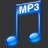
<style>
.page{position:relative;width:48px;height:48px;background:#333333}
.page>*{position:absolute;margin:0}
.t1{font:10px "Helvetica-Bold";color:#ffffff}
</style>
<div class="page">
<p class="t1" style="left:19px;top:3px;width:20px;height:11px;rotate:-12deg">MP3</p>
</div>
